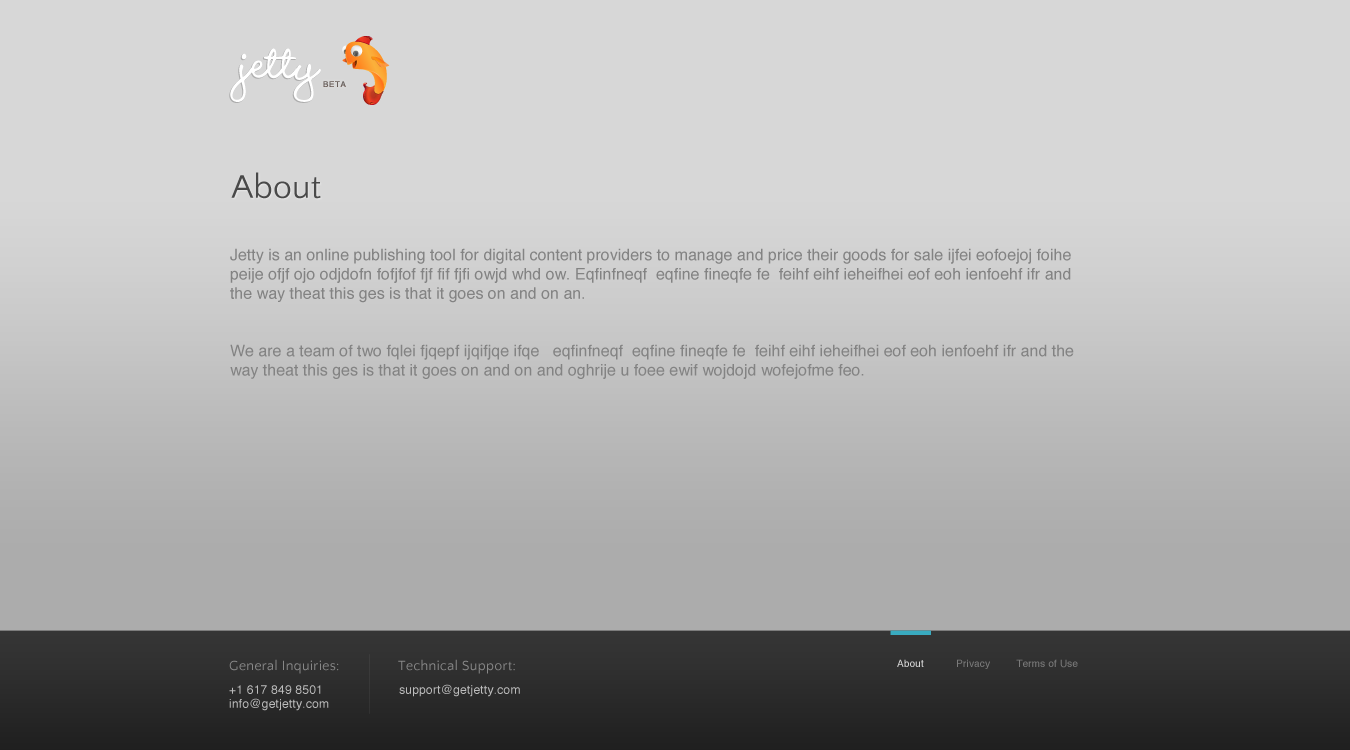
<style>
.page{position:relative;width:1350px;height:750px;background:#d7d7d7}
.page>*{position:absolute;margin:0}
.t1{font:66px "WendyLPStd-Bold";letter-spacing:0.015em;color:#ffffff}
.t2{font:8px "Helvetica";letter-spacing:0.08em;color:#717171}
.t3{font:34px "QuattrocentoSans";color:#494949}
.t4{font:16px "Helvetica";color:#838383}
.t5{font:14px "QuattrocentoSans";letter-spacing:0.02em;color:#888888}
.t6{font:10px "Helvetica";letter-spacing:0.015em;color:#7b7b7b}
.t7{font:10px "Helvetica";letter-spacing:0.015em;color:#d7d7d7}
.t8{font:12px/14px "Helvetica";letter-spacing:0.02em;color:#bcbcbc}
.t9{font:12px "Helvetica";letter-spacing:0.02em;color:#bcbcbc}
</style>
<div class="page">
<p class="t1" style="left:229px;top:48px;width:92px;height:55px">jetty</p>
<p class="t2" style="left:323px;top:81px;width:23px;height:6px">BETA</p>
<p class="t3" style="left:231px;top:172px;width:90px;height:27px">About</p>
<p class="t4" style="left:230px;top:248px;width:844px;height:131px">Jetty is an online publishing tool for digital content providers to manage and price their goods for sale ijfei eofoejoj foihe peije ofjf ojo odjdofn fofjfof fjf fif fjfi owjd whd ow. Eqfinfneqf  eqfine fineqfe fe  feihf eihf ieheifhei eof eoh ienfoehf ifr and the way theat this ges is that it goes on and on an.<br><br><br>We are a team of two fqlei fjqepf ijqifjqe ifqe   eqfinfneqf  eqfine fineqfe fe  feihf eihf ieheifhei eof eoh ienfoehf ifr and the way theat this ges is that it goes on and on and oghrije u foee ewif wojdojd wofejofme feo.</p>
<p class="t5" style="left:229px;top:659px;width:110px;height:15px">General Inquiries:</p>
<p class="t5" style="left:398px;top:659px;width:117px;height:15px">Technical Support:</p>
<p class="t6" style="left:897px;top:659px;width:181px;height:10px"><span class="t7">About</span>           Privacy         Terms of Use</p>
<p class="t8" style="left:229px;top:685px;width:100px;height:26px">+1 617 849 8501            <br>info@getjetty.com</p>
<p class="t9" style="left:399px;top:684px;width:121px;height:13px">support@getjetty.com</p>
</div>
